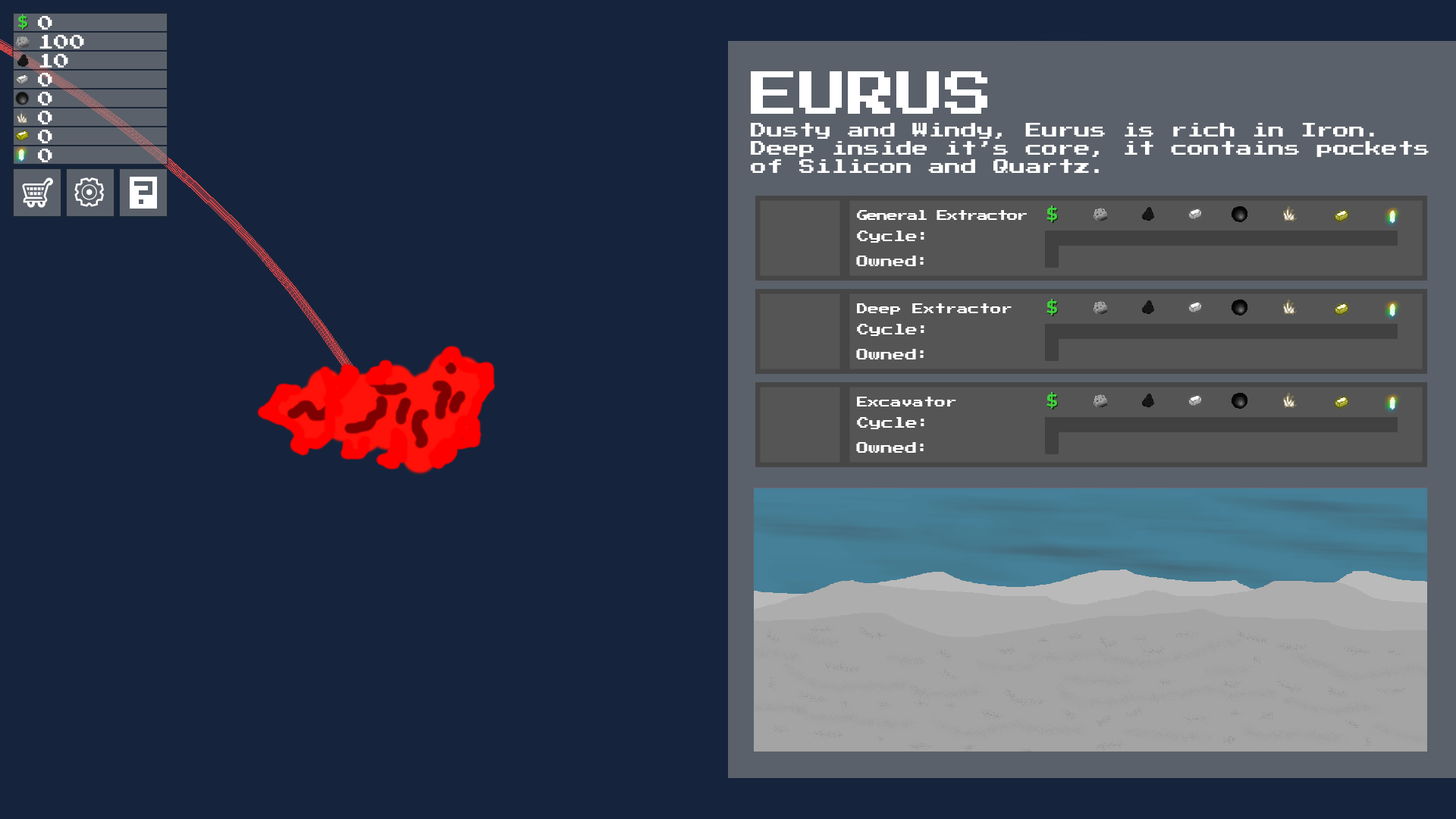
<style>
.page{position:relative;width:1456px;height:819px;background:#15243c}
.page>*{position:absolute;margin:0}
.t1{font:48.5px "PressStart2P-Regular";color:#ffffff}
.t2{font:16.2px/18.2px "PressStart2P-Regular";color:#ffffff}
.t3{font:11.1px "PressStart2P-Regular";letter-spacing:-0.1em;color:#ffffff}
.t4{font:12.1px "PressStart2P-Regular";color:#ffffff}
.t5{font:11.1px "PressStart2P-Regular";color:#ffffff}
</style>
<div class="page">
<p class="t1" style="left:751px;top:71px;width:236px;height:43px">EURUS</p>
<p class="t2" style="left:751px;top:123px;width:678px;height:50px">Dusty and Windy, Eurus is rich in Iron.<br>Deep inside it’s core, it contains pockets<br>of Silicon and Quartz.</p>
<p class="t3" style="left:857px;top:210px;width:170px;height:10px">General Extractor</p>
<p class="t4" style="left:857px;top:231px;width:67px;height:12px">Cycle:</p>
<p class="t4" style="left:856px;top:256px;width:68px;height:10px">Owned:</p>
<p class="t5" style="left:857px;top:303px;width:155px;height:12px">Deep Extractor</p>
<p class="t4" style="left:857px;top:324px;width:67px;height:12px">Cycle:</p>
<p class="t4" style="left:856px;top:349px;width:68px;height:10px">Owned:</p>
<p class="t5" style="left:857px;top:397px;width:99px;height:9px">Excavator</p>
<p class="t4" style="left:857px;top:417px;width:67px;height:12px">Cycle:</p>
<p class="t4" style="left:856px;top:442px;width:68px;height:11px">Owned:</p>
</div>
